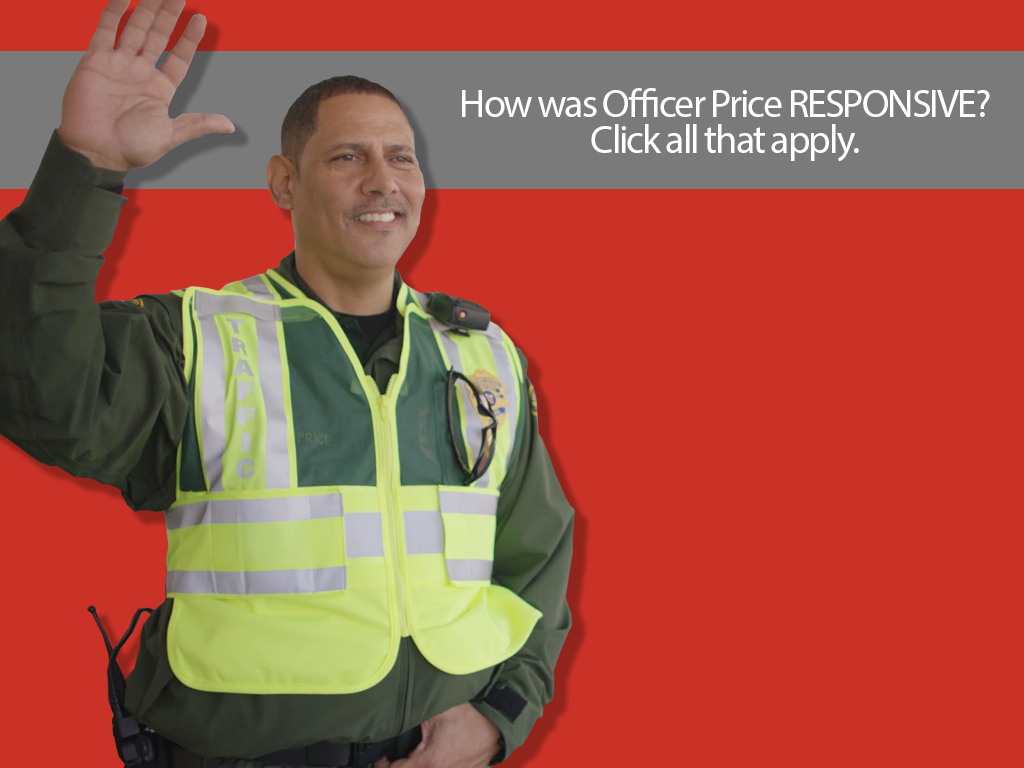
<style>
.page{position:relative;width:1024px;height:768px;background:#ca3227}
.page>*{position:absolute;margin:0}
.t1{font:40px/36px "MyriadPro-Regular";letter-spacing:-0.05em;color:#ffffff}
</style>
<div class="page">
<p class="t1" style="left:462px;top:88px;width:528px;height:74px;text-align:center">How was Officer Price RESPONSIVE?<br>Click all that apply.</p>
</div>
